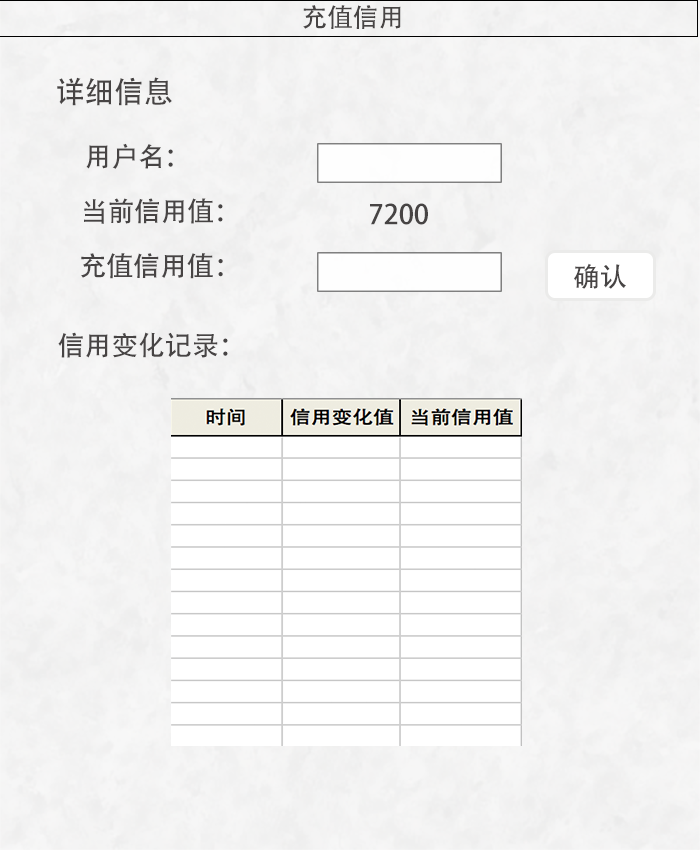
<style>
.page{position:relative;width:700px;height:850px}
.page>*{position:absolute;margin:0}
.t1{font:26px "AdobeHeitiStd-Regular";letter-spacing:-0.005em;color:#474444;text-transform:uppercase}
.t2{font:30px "AdobeHeitiStd-Regular";letter-spacing:-0.005em;color:#474444;text-transform:uppercase}
.t3{font:27px "AdobeHeitiStd-Regular";letter-spacing:-0.005em;color:#474444;text-transform:uppercase}
</style>
<div class="page">
<p class="t1" style="left:303px;top:5px;width:98px;height:24px">充值信用</p>
<p class="t2" style="left:57px;top:77px;width:115px;height:29px">详细信息</p>
<p class="t3" style="left:86px;top:143px;width:87px;height:26px">用户名：</p>
<p class="t3" style="left:84px;top:198px;width:139px;height:26px">当前信用值：</p>
<p class="t3" style="left:370px;top:203px;width:58px;height:22px">7200</p>
<p class="t3" style="left:81px;top:253px;width:142px;height:26px">充值信用值：</p>
<p class="t3" style="left:574px;top:263px;width:52px;height:26px">确认</p>
<p class="t3" style="left:58px;top:332px;width:170px;height:26px">信用变化记录：</p>
</div>
